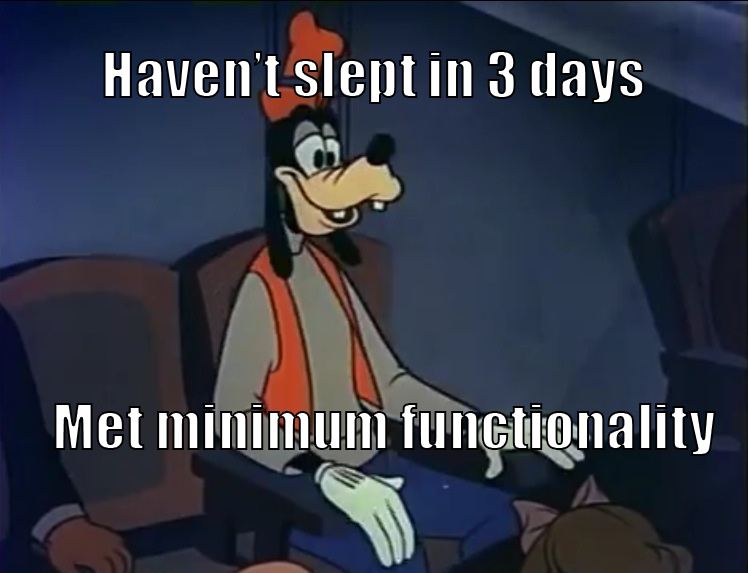
<style>
.page{position:relative;width:748px;height:573px}
.page>*{position:absolute;margin:0}
.t1{font:60px "Impact"}
</style>
<div class="page">
<p class="t1" style="left:103px;top:50px;width:542px;height:54px">Haven’t slept in 3 days</p>
<p class="t1" style="left:54px;top:403px;width:662px;height:53px">Met minimum functionality</p>
</div>
